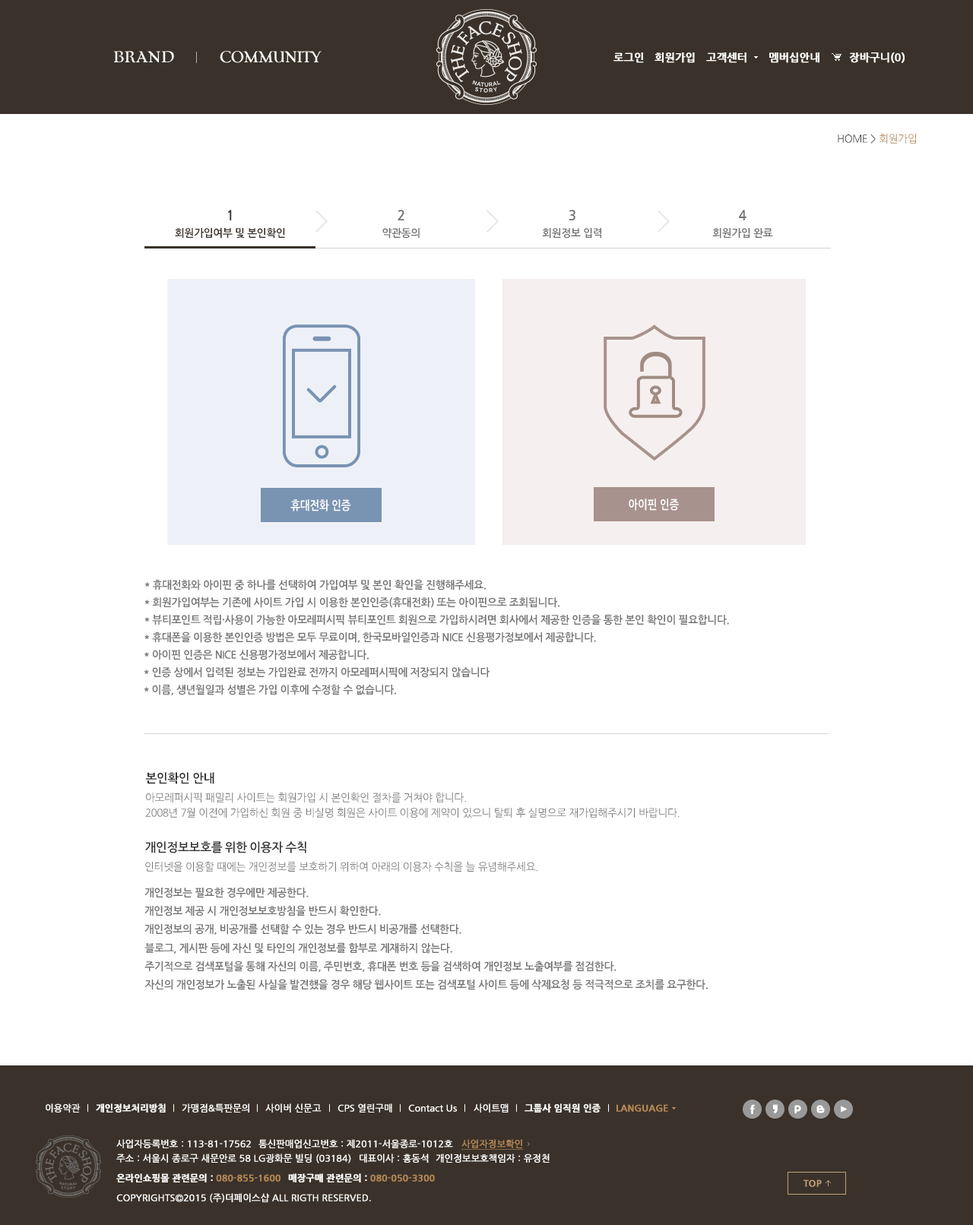
<style>
.page{position:relative;width:973px;height:1225px;background:#ffffff}
.page>*{position:absolute;margin:0}
.t1{font:10.6px "NanumGothicBold";color:#ffffff;font-weight:bold}
.t2{font:10.6px "NanumGothic";letter-spacing:-0.03em;color:#333333}
.t3{font:10.6px "NanumGothic";letter-spacing:-0.03em;color:#b68957}
.t4{font:13.7px "NanumGothicBold";letter-spacing:-0.03em;color:#3a322a}
.t5{font:13.7px "NanumGothicBold";letter-spacing:-0.03em;color:#737373}
.t6{font:10.6px "NanumGothicBold";letter-spacing:-0.03em;color:#3a322a}
.t7{font:10.6px "NanumGothicBold";letter-spacing:-0.03em;color:#737373}
.t8{font:12.2px "NanumGothicBold";letter-spacing:-0.03em;color:#333333}
.t9{font:10.6px/15.2px "NanumGothic";letter-spacing:-0.03em;color:#737373}
.t10{font:10.6px "NanumGothic";letter-spacing:-0.03em;color:#737373}
.t11{font:9.1px "NanumGothic";color:#ffffff;font-weight:bold}
.t12{font:9.1px "NanumGothicBold";color:#ffffff;font-weight:bold}
.t13{font:9.1px "NanumGothicBold";color:#b68957;font-weight:bold}
.t14{font:9.1px "NanumGothic";color:#b68957;font-weight:bold;text-decoration:underline}
</style>
<div class="page">
<p class="t1" style="left:613px;top:52px;width:31px;height:11px">로그인</p>
<p class="t1" style="left:655px;top:52px;width:40px;height:11px">회원가입</p>
<p class="t1" style="left:706px;top:52px;width:41px;height:11px">고객센터</p>
<p class="t1" style="left:769px;top:52px;width:50px;height:11px">멤버십안내</p>
<p class="t1" style="left:849px;top:52px;width:56px;height:11px">장바구니(0)</p>
<p class="t2" style="left:838px;top:134px;width:78px;height:10px">HOME &gt; <span class="t3">회원가입</span></p>
<p class="t4" style="left:227px;top:210px;width:5px;height:10px">1</p>
<p class="t5" style="left:398px;top:210px;width:6px;height:10px">2</p>
<p class="t5" style="left:569px;top:210px;width:6px;height:10px">3</p>
<p class="t5" style="left:739px;top:210px;width:8px;height:10px">4</p>
<p class="t6" style="left:175px;top:228px;width:110px;height:11px">회원가입여부 및 본인확인</p>
<p class="t7" style="left:382px;top:228px;width:38px;height:11px">약관동의</p>
<p class="t7" style="left:542px;top:228px;width:59px;height:11px">회원정보 입력</p>
<p class="t7" style="left:712px;top:228px;width:61px;height:11px">회원가입 완료</p>
<p class="t7" style="left:145px;top:579px;width:341px;height:12px">* 휴대전화와 아이핀 중 하나를 선택하여 가입여부 및 본인 확인을 진행해주세요.</p>
<p class="t7" style="left:144px;top:598px;width:416px;height:10px">* 회원가입여부는 기존에 사이트 가입 시 이용한 본인인증(휴대전화) 또는 아이핀으로 조회됩니다.</p>
<p class="t7" style="left:144px;top:614px;width:585px;height:12px">* 뷰티포인트 적립·사용이 가능한 아모레퍼시픽 뷰티포인트 회원으로 가입하시려면 회사에서 제공한 인증을 통한 본인 확인이 필요합니다.</p>
<p class="t7" style="left:144px;top:632px;width:452px;height:11px">* 휴대폰을 이용한 본인인증 방법은 모두 무료이며, 한국모바일인증과 NICE 신용평가정보에서 제공합니다.</p>
<p class="t7" style="left:144px;top:650px;width:225px;height:11px">* 아이핀 인증은 NICE 신용평가정보에서 제공합니다.</p>
<p class="t7" style="left:144px;top:667px;width:346px;height:11px">* 인증 상에서 입력된 정보는 가입완료 전까지 아모레퍼시픽에 저장되지 않습니다</p>
<p class="t7" style="left:144px;top:685px;width:252px;height:11px">* 이름, 생년월일과 성별은 가입 이후에 수정할 수 없습니다.</p>
<p class="t8" style="left:145px;top:772px;width:69px;height:13px">본인확인 안내</p>
<p class="t9" style="left:145px;top:793px;width:535px;height:25px">아모레퍼시픽 패밀리 사이트는 회원가입 시 본인확인 절차를 거쳐야 합니다.<br>2008년 7월 이전에 가입하신 회원 중 비실명 회원은 사이트 이용에 제약이 있으니 탈퇴 후 실명으로 재가입해주시기 바랍니다.</p>
<p class="t8" style="left:145px;top:842px;width:161px;height:12px">개인정보보호를 위한 이용자 수칙</p>
<p class="t10" style="left:145px;top:862px;width:392px;height:10px">인터넷을 이용할 때에는 개인정보를 보호하기 위하여 아래의 이용자 수칙을 늘 유념해주세요.</p>
<p class="t7" style="left:144px;top:888px;width:165px;height:11px">개인정보는 필요한 경우에만 제공한다.</p>
<p class="t7" style="left:144px;top:905px;width:237px;height:12px">개인정보 제공 시 개인정보보호방침을 반드시 확인한다.</p>
<p class="t7" style="left:144px;top:924px;width:317px;height:11px">개인정보의 공개, 비공개를 선택할 수 있는 경우 반드시 비공개를 선택한다.</p>
<p class="t7" style="left:144px;top:943px;width:308px;height:11px">블로그, 게시판 등에 자신 및 타인의 개인정보를 함부로 게재하지 않는다.</p>
<p class="t7" style="left:144px;top:961px;width:473px;height:11px">주기적으로 검색포털을 통해 자신의 이름, 주민번호, 휴대폰 번호 등을 검색하여 개인정보 노출여부를 점검한다.</p>
<p class="t7" style="left:144px;top:979px;width:564px;height:12px">자신의 개인정보가 노출된 사실을 발견했을 경우 해당 웹사이트 또는 검색포털 사이트 등에 삭제요청 등 적극적으로 조치를 요구한다.</p>
<p class="t11" style="left:46px;top:1104px;width:35px;height:9px">이용약관</p>
<p class="t12" style="left:96px;top:1104px;width:70px;height:9px">개인정보처리방침</p>
<p class="t11" style="left:182px;top:1104px;width:67px;height:9px">가맹점&amp;특판문의</p>
<p class="t11" style="left:265px;top:1104px;width:57px;height:9px">사이버 신문고</p>
<p class="t11" style="left:338px;top:1104px;width:54px;height:9px">CPS 열린구매</p>
<p class="t11" style="left:408px;top:1105px;width:49px;height:7px">Contact Us</p>
<p class="t11" style="left:474px;top:1104px;width:35px;height:9px">사이트맵</p>
<p class="t12" style="left:525px;top:1104px;width:76px;height:9px">그룹사 임직원 인증</p>
<p class="t13" style="left:617px;top:1105px;width:51px;height:7px">LANGUAGE</p>
<p class="t11" style="left:116px;top:1140px;width:135px;height:9px">사업자등록번호 : 113-81-17562</p>
<p class="t11" style="left:258px;top:1140px;width:195px;height:9px">통신판매업신고번호 : 제2011-서울종로-1012호</p>
<p class="t14" style="left:461px;top:1140px;width:63px;height:10px">사업자정보확인</p>
<p class="t11" style="left:116px;top:1154px;width:235px;height:10px">주소 : 서울시 종로구 새문안로 58 LG광화문 빌딩 (03184)</p>
<p class="t11" style="left:360px;top:1154px;width:69px;height:9px">대표이사 : 홍동석</p>
<p class="t11" style="left:436px;top:1154px;width:114px;height:9px">개인정보보호책임자 : 유정천</p>
<p class="t12" style="left:116px;top:1174px;width:165px;height:9px">온라인쇼핑몰 관련문의 : <span class="t13">080-855-1600</span></p>
<p class="t13" style="left:288px;top:1174px;width:147px;height:9px"><span class="t12">매장구매 관련문의 : </span>080-050-3300</p>
<p class="t11" style="left:116px;top:1194px;width:255px;height:9px">COPYRIGHTS©2015 (주)더페이스샵 ALL RIGTH RESERVED.</p>
</div>
